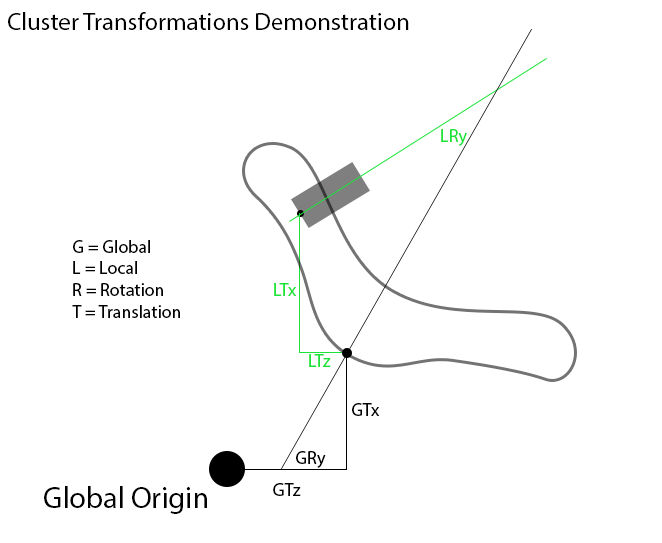
<style>
.page{position:relative;width:662px;height:543px;background:#ffffff}
.page>*{position:absolute;margin:0}
.t1{font:24.8px "MyriadPro-Regular";color:#000000}
.t2{font:18px "MyriadPro-Regular";color:#1de339}
.t3{font:18px "MyriadPro-Regular";color:#000000}
.t4{font:30px "MyriadPro-Regular";color:#000000}
</style>
<div class="page">
<p class="t1" style="left:8px;top:12px;width:401px;height:18px">Cluster Transformations Demonstration</p>
<p class="t2" style="left:441px;top:129px;width:26px;height:17px">LRy</p>
<p class="t3" style="left:72px;top:240px;width:108px;height:78px">G = Global<br>L = Local<br>R = Rotation<br>T = Translation</p>
<p class="t2" style="left:274px;top:283px;width:23px;height:13px">LTx</p>
<p class="t2" style="left:309px;top:354px;width:22px;height:13px">LTz</p>
<p class="t3" style="left:352px;top:403px;width:28px;height:13px">GTx</p>
<p class="t3" style="left:296px;top:451px;width:30px;height:17px">GRy</p>
<p class="t4" style="left:44px;top:486px;width:163px;height:28px">Global Origin</p>
<p class="t3" style="left:273px;top:483px;width:28px;height:13px">GTz</p>
</div>
